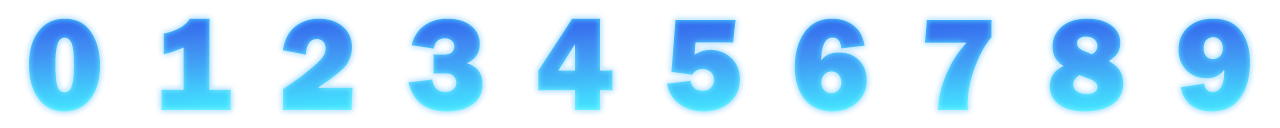
<style>
.page{position:relative;width:1280px;height:128px;background:#ffffff}
.page>*{position:absolute;margin:0}
.t1{font:134.7px "FranklinGothic-Heavy"}
</style>
<div class="page">
<p class="t1" style="left:29px;top:18px;width:71px;height:94px">0</p>
<p class="t1" style="left:161px;top:18px;width:70px;height:92px">1</p>
<p class="t1" style="left:283px;top:18px;width:70px;height:92px">2</p>
<p class="t1" style="left:408px;top:18px;width:75px;height:94px">3</p>
<p class="t1" style="left:538px;top:18px;width:75px;height:92px">4</p>
<p class="t1" style="left:667px;top:20px;width:73px;height:92px">5</p>
<p class="t1" style="left:794px;top:18px;width:73px;height:94px">6</p>
<p class="t1" style="left:925px;top:20px;width:67px;height:90px">7</p>
<p class="t1" style="left:1049px;top:18px;width:75px;height:94px">8</p>
<p class="t1" style="left:1178px;top:18px;width:72px;height:94px">9</p>
</div>
